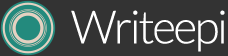
<style>
.page{position:relative;width:228px;height:56px;background:#333333}
.page>*{position:absolute;margin:0}
.t1{font:45.8px "Lato-Light";letter-spacing:-0.05em;color:#ffffff}
</style>
<div class="page">
<p class="t1" style="left:71px;top:10px;width:154px;height:42px">Writeepi</p>
</div>
